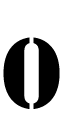
<style>
.page{position:relative;width:64px;height:128px;background:#ffffff}
.page>*{position:absolute;margin:0}
.t1{font:91.7px "StencilStd";color:#000000}
</style>
<div class="page">
<p class="t1" style="left:3px;top:37px;width:57px;height:72px">0</p>
</div>
